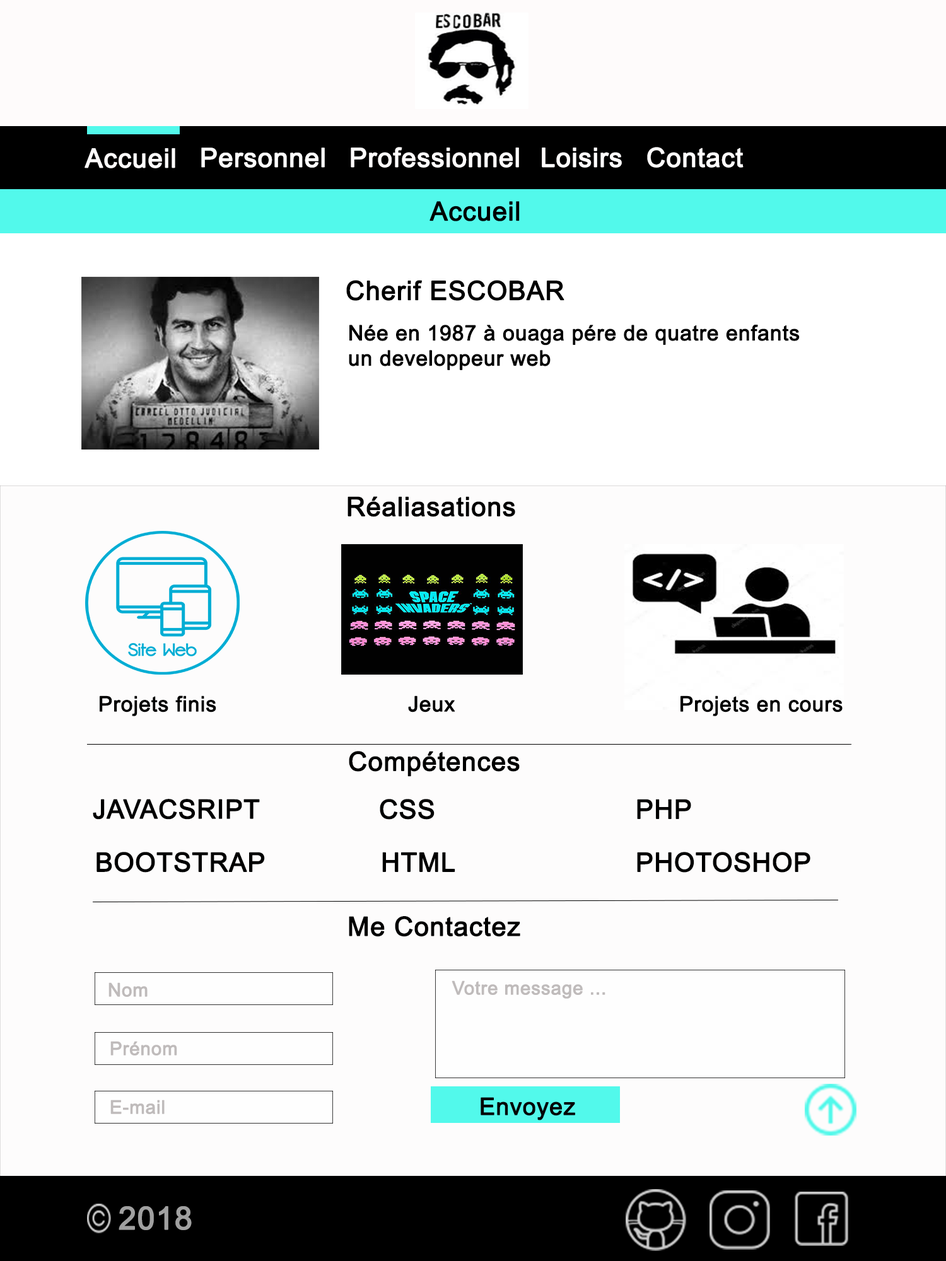
<style>
.page{position:relative;width:946px;height:1261px;background:#fdfcfc}
.page>*{position:absolute;margin:0}
.t1{font:26.3px "ArialMT";letter-spacing:0.015em;color:#fefcfc;font-weight:bold}
.t2{font:26.3px "ArialMT";letter-spacing:0.01em;color:#fefefe;font-weight:bold}
.t3{font:26.3px "ArialMT";letter-spacing:0.01em;color:#fefcfc;font-weight:bold}
.t4{font:26.3px "ArialMT";letter-spacing:0.01em;color:#000000;font-weight:bold}
.t5{font:21px "ArialMT";letter-spacing:0.01em;color:#000000;font-weight:bold}
.t6{font:18.4px "ArialMT";letter-spacing:0.01em;color:#bfbbbb;font-weight:bold}
.t7{font:23.6px "ArialMT";letter-spacing:0.01em;color:#050505;font-weight:bold}
.t8{font:31.5px "ArialMT";letter-spacing:0.01em;color:#a0a0a0;font-weight:bold}
</style>
<div class="page">
<p class="t1" style="left:84px;top:148px;width:91px;height:20px">Accueil</p>
<p class="t2" style="left:201px;top:148px;width:124px;height:20px">Personnel</p>
<p class="t3" style="left:351px;top:147px;width:168px;height:21px">Professionnel</p>
<p class="t3" style="left:542px;top:148px;width:80px;height:20px">Loisirs</p>
<p class="t3" style="left:647px;top:147px;width:96px;height:21px">Contact</p>
<p class="t4" style="left:429px;top:201px;width:90px;height:20px">Accueil</p>
<p class="t4" style="left:346px;top:280px;width:218px;height:21px">Cherif ESCOBAR</p>
<p class="t5" style="left:349px;top:325px;width:450px;height:45px">Née en 1987 à ouaga pére de quatre enfants<br>un developpeur web</p>
<p class="t4" style="left:347px;top:496px;width:168px;height:21px">Réaliasations</p>
<p class="t5" style="left:100px;top:695px;width:116px;height:21px">Projets finis</p>
<p class="t5" style="left:408px;top:695px;width:47px;height:17px">Jeux</p>
<p class="t5" style="left:680px;top:695px;width:162px;height:21px">Projets en cours</p>
<p class="t4" style="left:349px;top:751px;width:170px;height:26px">Compétences</p>
<p class="t4" style="left:93px;top:799px;width:167px;height:21px">JAVACSRIPT</p>
<p class="t4" style="left:380px;top:799px;width:54px;height:21px">CSS</p>
<p class="t4" style="left:637px;top:799px;width:54px;height:20px">PHP</p>
<p class="t4" style="left:96px;top:852px;width:169px;height:21px">BOOTSTRAP</p>
<p class="t4" style="left:382px;top:852px;width:73px;height:20px">HTML</p>
<p class="t4" style="left:637px;top:852px;width:173px;height:21px">PHOTOSHOP</p>
<p class="t4" style="left:349px;top:916px;width:171px;height:21px">Me Contactez</p>
<p class="t6" style="left:108px;top:982px;width:40px;height:15px">Nom</p>
<p class="t6" style="left:451px;top:980px;width:154px;height:19px">Votre message ...</p>
<p class="t6" style="left:110px;top:1041px;width:67px;height:14px">Prénom</p>
<p class="t7" style="left:480px;top:1097px;width:95px;height:23px">Envoyez</p>
<p class="t6" style="left:110px;top:1100px;width:55px;height:14px">E-mail</p>
<p class="t8" style="left:119px;top:1206px;width:73px;height:24px">2018</p>
</div>
